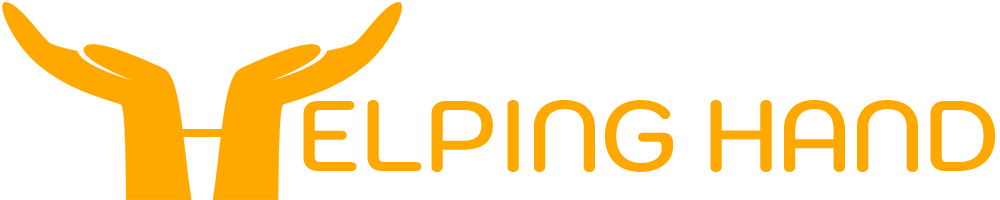
<style>
.page{position:relative;width:1000px;height:200px;background:#ffffff}
.page>*{position:absolute;margin:0}
.t1{font:100px "Kodchasan-SemiBold";color:#ffa800;text-transform:uppercase}
</style>
<div class="page">
<p class="t1" style="left:303px;top:100px;width:692px;height:72px">Elping Hand</p>
</div>
